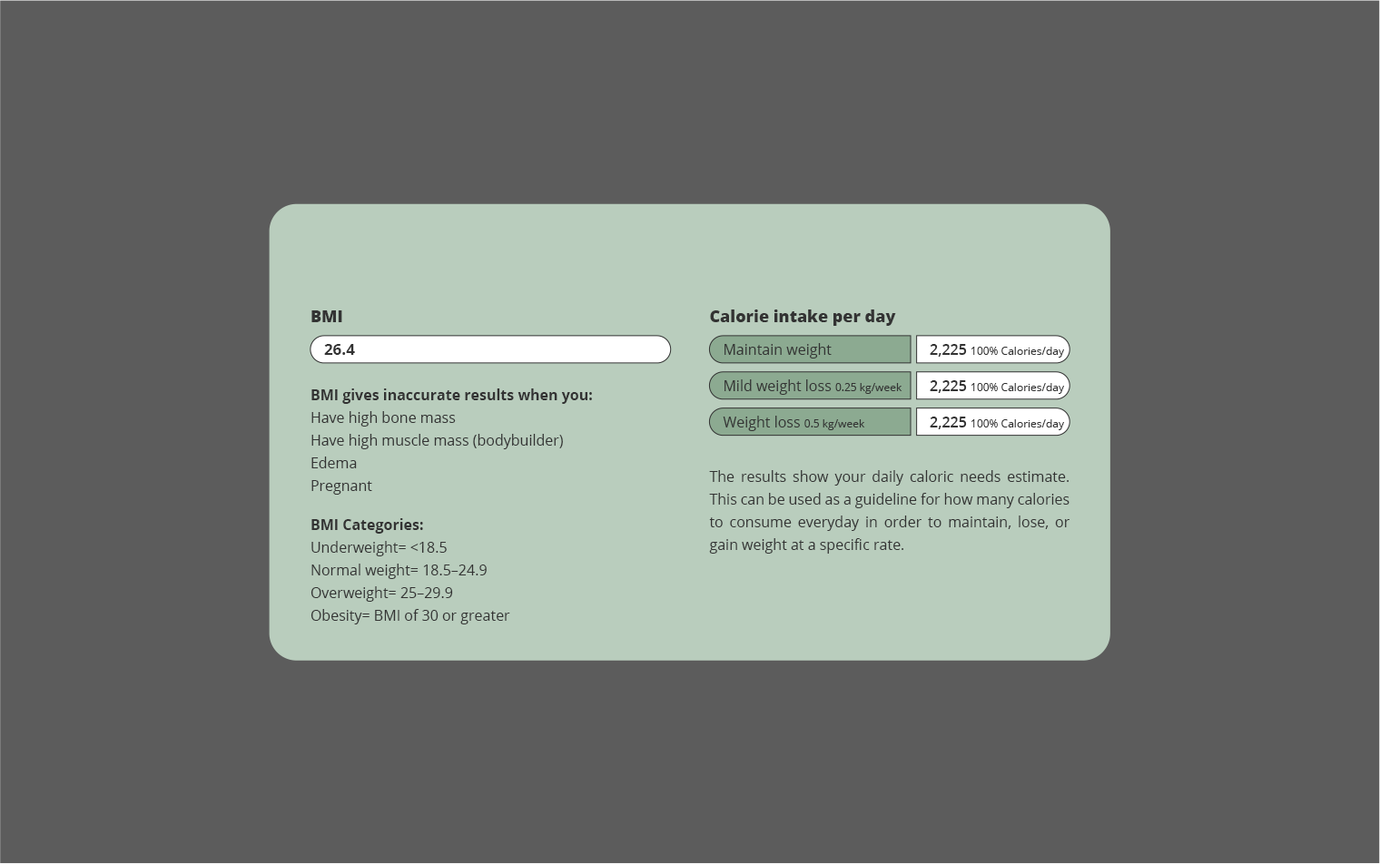
<style>
.page{position:relative;width:1380px;height:864px;background:#5c5c5c}
.page>*{position:absolute;margin:0}
.t1{font:16.3px "OpenSans-Extrabold";color:#333333}
.t2{font:15.4px "OpenSans-Bold";color:#333333}
.t3{font:14.5px "OpenSans";color:#333333}
.t4{font:10.9px "OpenSans";color:#333333}
.t5{font:14.5px "OpenSans-Semibold";color:#333333}
.t6{font:14.5px/22.7px "OpenSans";color:#333333}
.t7{font:14.5px/22.7px "OpenSans-Bold";color:#333333}
</style>
<div class="page">
<p class="t1" style="left:311px;top:310px;width:31px;height:12px">BMI</p>
<p class="t1" style="left:710px;top:310px;width:186px;height:16px">Calorie intake per day</p>
<p class="t2" style="left:324px;top:344px;width:31px;height:11px">26.4</p>
<p class="t3" style="left:724px;top:343px;width:108px;height:16px">Maintain weight</p>
<p class="t4" style="left:930px;top:344px;width:134px;height:14px"><span class="t5">2,225 </span>100% Calories/day</p>
<p class="t6" style="left:311px;top:389px;width:281px;height:106px;text-align:justify"><span class="t7">BMI gives inaccurate results when you:<br></span>Have high bone mass<br>Have high muscle mass (bodybuilder) <br>Edema<br>Pregnant</p>
<p class="t3" style="left:724px;top:379px;width:178px;height:16px">Mild weight loss <span class="t4">0.25 kg/week</span></p>
<p class="t4" style="left:930px;top:380px;width:134px;height:14px"><span class="t5">2,225 </span>100% Calories/day</p>
<p class="t3" style="left:723px;top:416px;width:142px;height:15px">Weight loss <span class="t4">0.5 kg/week</span></p>
<p class="t4" style="left:930px;top:417px;width:134px;height:13px"><span class="t5">2,225 </span>100% Calories/day</p>
<p class="t6" style="left:709px;top:470px;width:360px;height:84px;text-align:justify">The results show your daily caloric needs estimate. This can be used as a guideline for how many calories to consume everyday in order to maintain, lose, or gain weight at a specific rate.</p>
<p class="t6" style="left:310px;top:518px;width:200px;height:107px;text-align:justify"><span class="t7">BMI Categories:<br></span>Underweight= &lt;18.5<br>Normal weight= 18.5–24.9<br>Overweight= 25–29.9<br>Obesity= BMI of 30 or greater</p>
</div>
